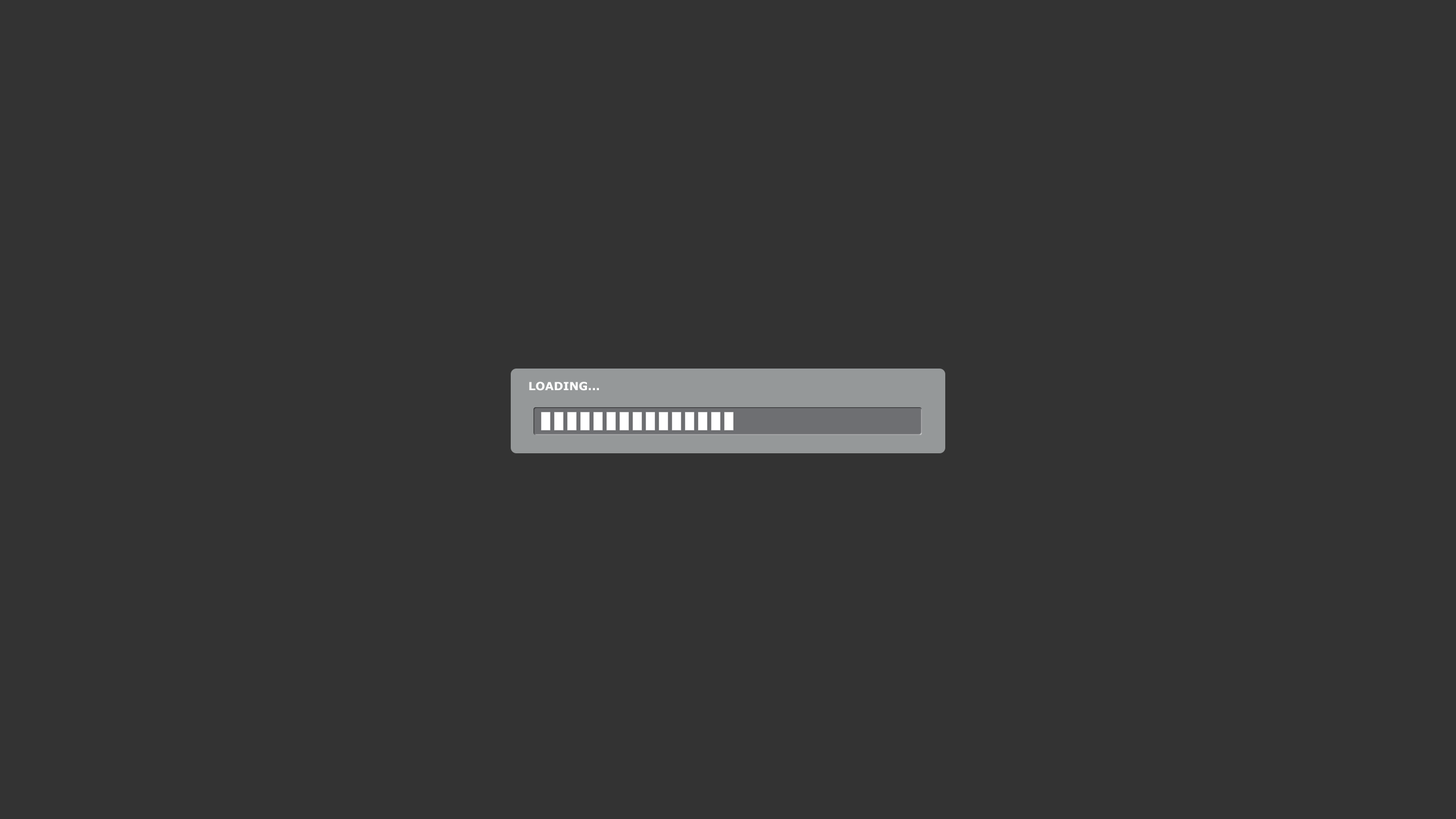
<style>
.page{position:relative;width:1456px;height:819px;background:#333333}
.page>*{position:absolute;margin:0}
.t1{font:11.2px "Verdana-Bold";color:#ffffff}
</style>
<div class="page">
<p class="t1" style="left:529px;top:382px;width:70px;height:9px">LOADING...</p>
</div>
